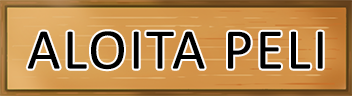
<style>
.page{position:relative;width:352px;height:96px}
.page>*{position:absolute;margin:0}
.t1{font:58px "Calibri";letter-spacing:0.04em;color:#000000}
</style>
<div class="page">
<p class="t1" style="left:27px;top:31px;width:296px;height:39px">ALOITA PELI</p>
</div>
